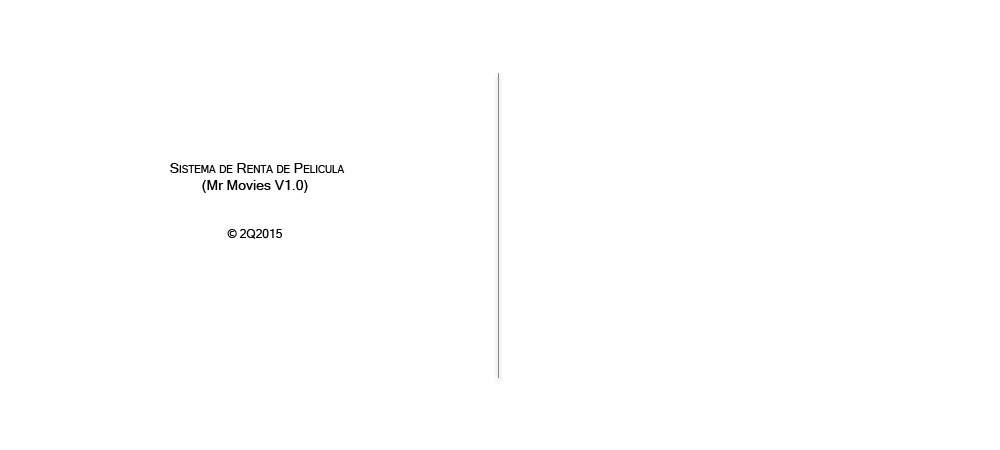
<style>
.page{position:relative;width:1000px;height:450px;background:#ffffff}
.page>*{position:absolute;margin:0}
.t1{font:14px "MicrosoftSansSerif";color:#000000;font-variant:small-caps}
.t2{font:14px "MicrosoftSansSerif";color:#000000}
.t3{font:12px "MicrosoftSansSerif";color:#000000}
</style>
<div class="page">
<p class="t1" style="left:170px;top:163px;width:175px;height:76px;text-align:center"><span class="t2"><br><br><br><br><br><br></span> Sistema de Renta de Pelicula<span class="t2"> <br>(Mr Movies V1.0)<br><br><br></span><span class="t3">© 2Q2015</span></p>
</div>
